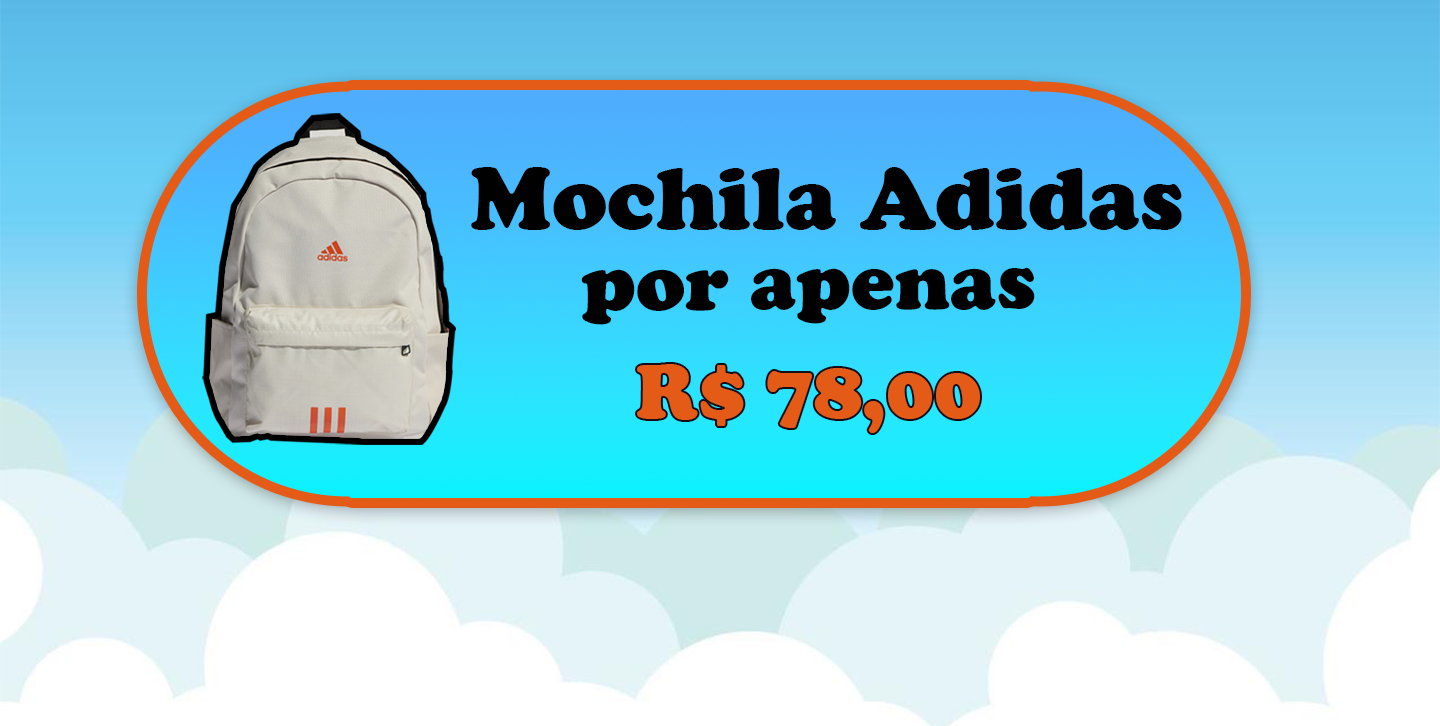
<style>
.page{position:relative;width:1440px;height:726px}
.page>*{position:absolute;margin:0}
.t1{font:92.1px "CooperBlack";color:#010101}
.t2{font:82.3px "CooperBlack";color:#010101}
.t3{font:80px "CooperBlack";color:#e45b17}
</style>
<div class="page">
<p class="t1" style="left:471px;top:167px;width:711px;height:63px">Mochila Adidas</p>
<p class="t2" style="left:581px;top:267px;width:454px;height:58px">por apenas</p>
<p class="t3" style="left:637px;top:364px;width:343px;height:69px">R$ 78,00</p>
</div>
